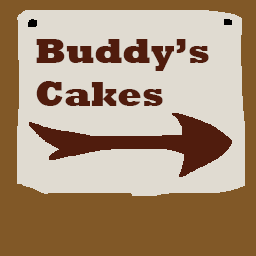
<style>
.page{position:relative;width:256px;height:256px;background:#e0dbd1}
.page>*{position:absolute;margin:0}
.t1{font:36px "Rockwell-ExtraBold";color:#501c0d}
</style>
<div class="page">
<p class="t1" style="left:36px;top:39px;width:173px;height:67px">Buddy’s<br>Cakes</p>
</div>
